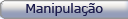
<style>
.page{position:relative;width:128px;height:19px}
.page>*{position:absolute;margin:0}
.t1{font:12.5px "Verdana";color:#1b1b4c}
</style>
<div class="page">
<p class="t1" style="left:26px;top:3px;width:77px;height:13px">Manipulação</p>
</div>
